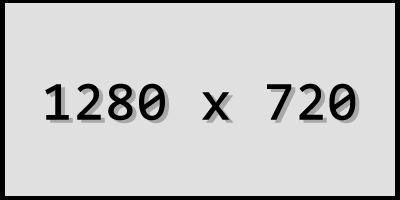
<style>
.page{position:relative;width:400px;height:200px;background:#e0e0e0}
.page>*{position:absolute;margin:0}
.t1{font:55px "Consolas";color:#000000;font-weight:bold}
</style>
<div class="page">
<p class="t1" style="left:45px;top:83px;width:311px;height:38px">1280 x 720</p>
</div>
